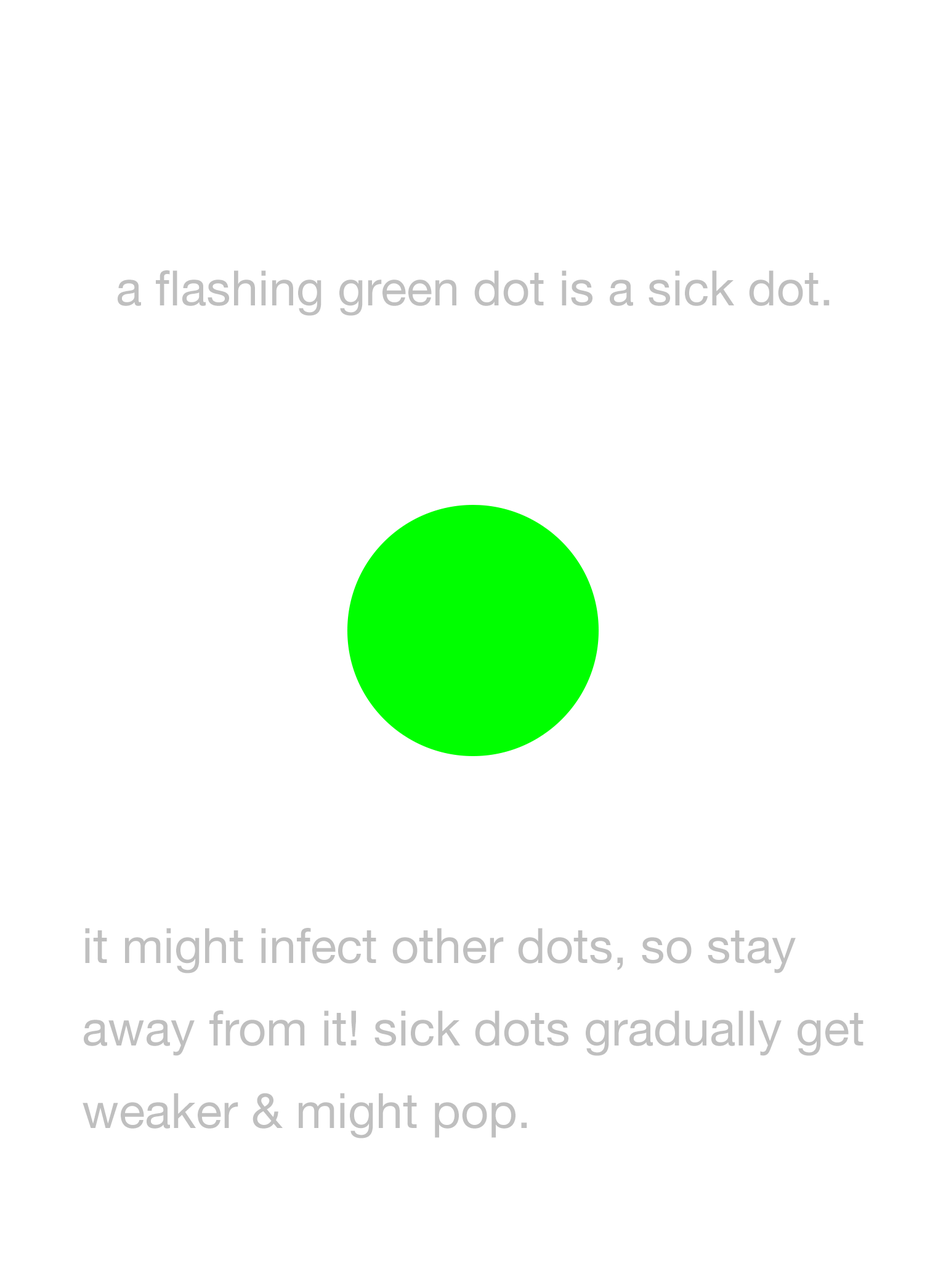
<style>
.page{position:relative;width:946px;height:1261px;background:#ffffff}
.page>*{position:absolute;margin:0}
.t1{font:48.6px "HelveticaNeue";color:#bfbfbf}
.t2{font:48.6px/82.5px "HelveticaNeue";color:#bfbfbf}
</style>
<div class="page">
<p class="t1" style="left:118px;top:270px;width:711px;height:46px">a flashing green dot is a sick dot.</p>
<p class="t2" style="left:83px;top:928px;width:780px;height:210px">it might infect other dots, so stay<br>away from it! sick dots gradually get<br>weaker &amp; might pop.</p>
</div>
